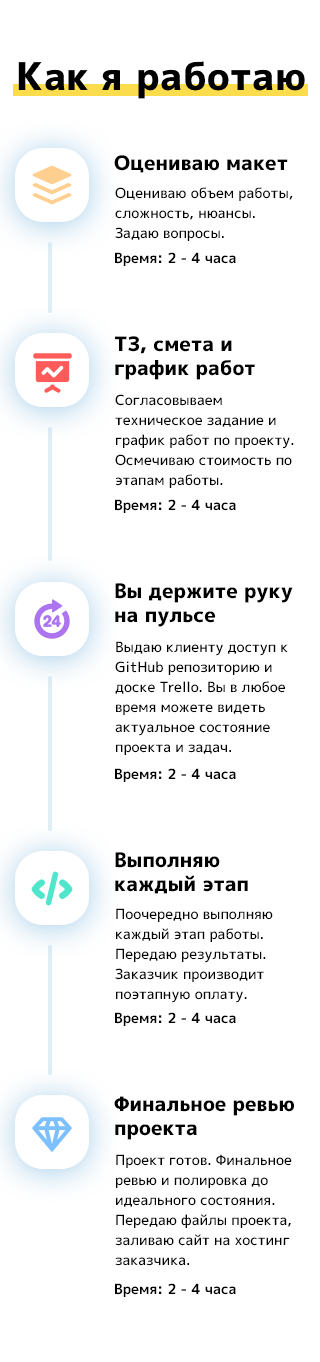
<style>
.page{position:relative;width:320px;height:1362px;background:#ffffff}
.page>*{position:absolute;margin:0}
.t1{font:38px "Mplus1p-ExtraBold";color:#000000}
.t2{font:20px "Mplus1p-ExtraBold";color:#000000}
.t3{font:14px/20px "Mplus1p-Medium";color:#000000}
.t4{font:14px "Mplus1p-Bold";color:#000000}
</style>
<div class="page">
<p class="t1" style="left:18px;top:61px;width:287px;height:38px">Как я работаю</p>
<p class="t2" style="left:114px;top:155px;width:174px;height:18px">Оцениваю макет</p>
<p class="t3" style="left:115px;top:187px;width:178px;height:54px">Оцениваю объем работы, сложность, нюансы. <br>Задаю вопросы.</p>
<p class="t4" style="left:115px;top:252px;width:121px;height:14px">Время: 2 - 4 часа</p>
<p class="t2" style="left:115px;top:336px;width:140px;height:44px">ТЗ, смета и <br>график работ</p>
<p class="t3" style="left:115px;top:394px;width:179px;height:94px">Согласовываем <br>техническое задание и <br>график работ по проекту. Осмечиваю стоимость по <br>этапам работы.</p>
<p class="t4" style="left:115px;top:499px;width:121px;height:14px">Время: 2 - 4 часа</p>
<p class="t2" style="left:115px;top:583px;width:178px;height:44px">Вы держите руку <br>на пульсе</p>
<p class="t3" style="left:115px;top:641px;width:173px;height:114px">Выдаю клиенту доступ к GitHub репозиторию и <br>доске Trello. Вы в любое <br>время можете видеть <br>актуальное состояние <br>проекта и задач.</p>
<p class="t4" style="left:115px;top:768px;width:121px;height:14px">Время: 2 - 4 часа</p>
<p class="t2" style="left:115px;top:852px;width:133px;height:42px">Выполняю <br>каждый этап</p>
<p class="t3" style="left:115px;top:908px;width:158px;height:95px">Поочередно выполняю <br>каждый этап работы. <br>Передаю результаты. <br>Заказчик производит <br>поэтапную оплату.</p>
<p class="t4" style="left:115px;top:1012px;width:121px;height:14px">Время: 2 - 4 часа</p>
<p class="t2" style="left:114px;top:1096px;width:180px;height:44px">Финальное ревью <br>проекта</p>
<p class="t3" style="left:115px;top:1154px;width:177px;height:112px">Проект готов. Финальное ревью и полировка до <br>идеального состояния. <br>Передаю файлы проекта, <br>заливаю сайт на хостинг <br>заказчика.</p>
<p class="t4" style="left:115px;top:1283px;width:121px;height:14px">Время: 2 - 4 часа</p>
</div>
